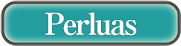
<style>
.page{position:relative;width:181px;height:46px}
.page>*{position:absolute;margin:0}
.t1{font:30px "RyuminPro-ExBold";letter-spacing:-0.08em;color:#ffffff}
</style>
<div class="page">
<p class="t1" style="left:45px;top:12px;width:92px;height:24px">Perluas</p>
</div>
